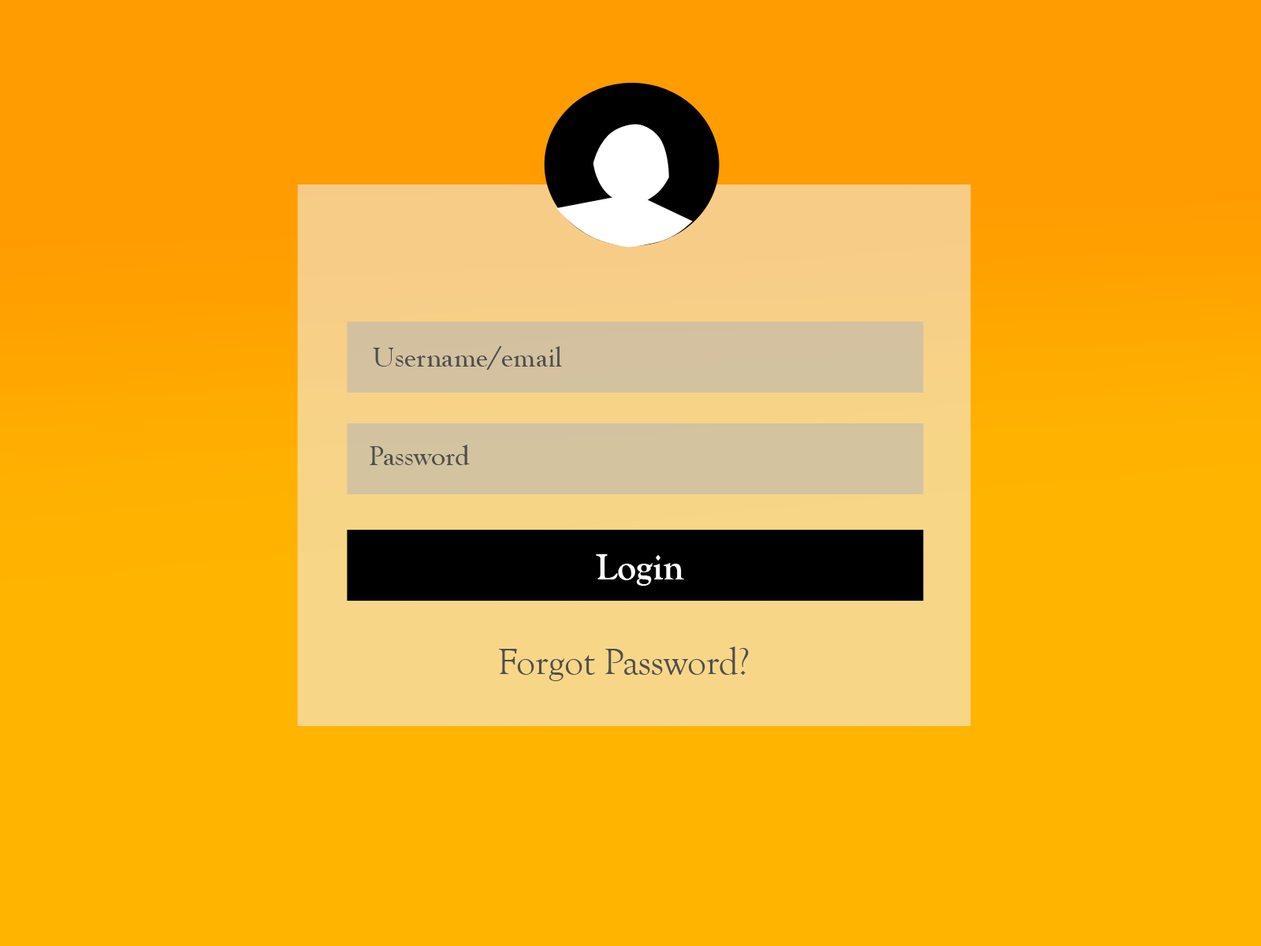
<style>
.page{position:relative;width:1261px;height:946px;background:#ffb400}
.page>*{position:absolute;margin:0}
.t1{font:28.4px "GoudyOldStyleT-Regular";color:#4e4e4e}
.t2{font:37.8px "GoudyOldStyleT-Bold";color:#ffffff}
.t3{font:37.8px "GoudyOldStyleT-Regular";color:#4e4e4e}
</style>
<div class="page">
<p class="t1" style="left:373px;top:346px;width:189px;height:24px">Username/email</p>
<p class="t1" style="left:370px;top:444px;width:100px;height:21px">Password</p>
<p class="t2" style="left:596px;top:554px;width:88px;height:32px">Login</p>
<p class="t3" style="left:499px;top:646px;width:250px;height:35px">Forgot Password?</p>
</div>
